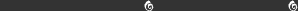
<style>
.page{position:relative;width:298px;height:11px;background:#333333}
.page>*{position:absolute;margin:0}
.t1{font:28px "Gigi-Regular";color:#ffffff}
</style>
<div class="page">
<p class="t1" style="left:144px;top:0px;width:154px;height:11px">o    o</p>
</div>
